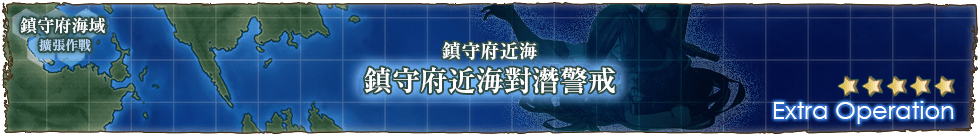
<style>
.page{position:relative;width:980px;height:136px}
.page>*{position:absolute;margin:0}
.t1{font:17px/22px "RyuminPr6N-ExBold";color:#ffffff}
.t2{font:13px/22px "RyuminPr6N-ExBold";color:#b9d7f5}
.t3{font:19px "RyuminPro-ExBold";color:#ffffff}
.t4{font:28px "RyuminPro-ExBold";color:#ffffff}
</style>
<div class="page">
<p class="t1" style="left:20px;top:17px;width:85px;height:35px">鎮守府海域<br>　　　<span class="t2">擴張作戰</span></p>
<p class="t3" style="left:442px;top:41px;width:95px;height:19px">鎮守府近海</p>
<p class="t4" style="left:364px;top:67px;width:251px;height:27px">鎮守府近海對潛警戒</p>
</div>
